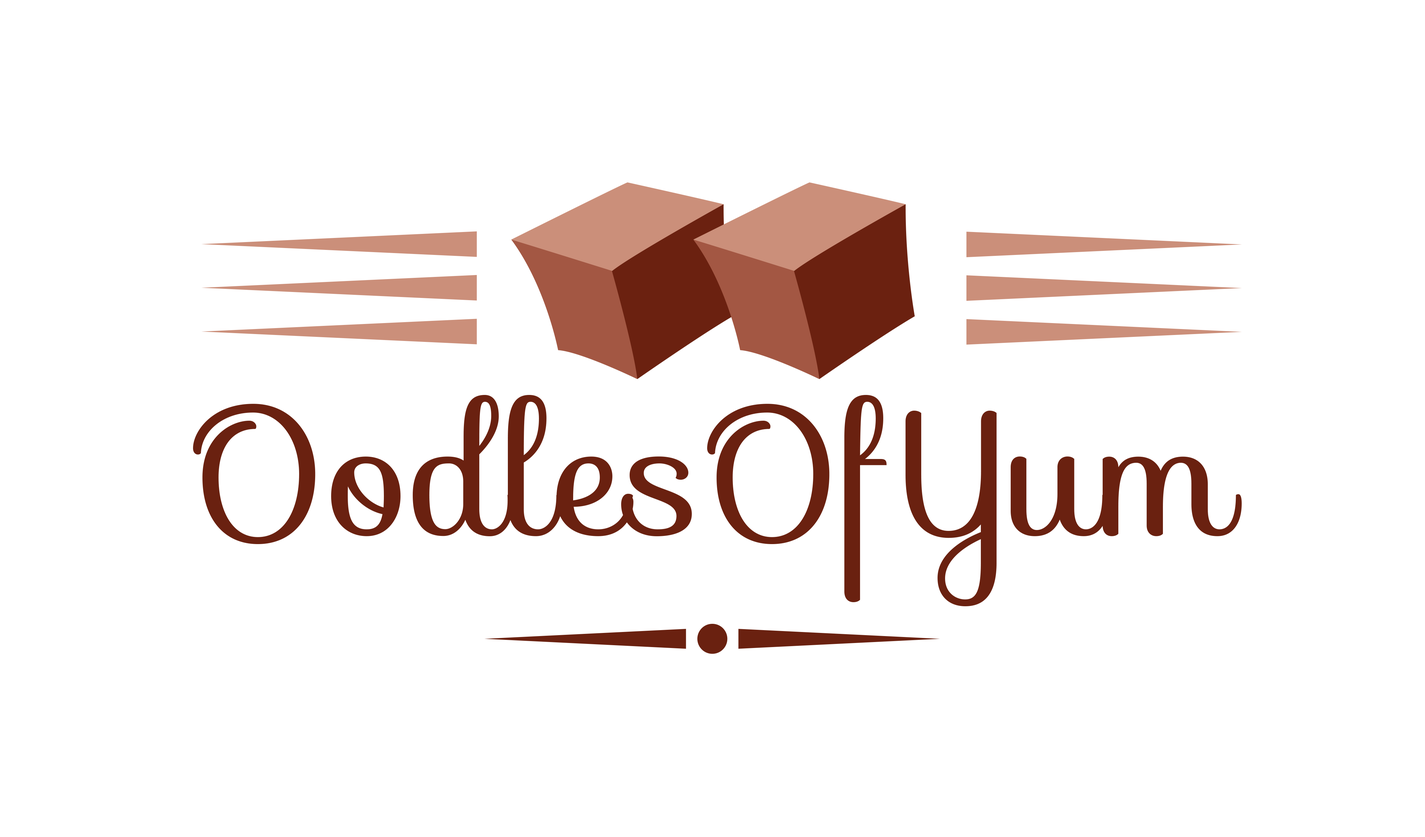
<style>
.page{position:relative;width:1425px;height:837px;background:#ffffff}
.page>*{position:absolute;margin:0}
.t1{font:174.8px "Sofia-Regular";color:#6a2110}
</style>
<div class="page">
<p class="t1" style="left:193px;top:395px;width:1049px;height:211px">OodlesOfYum</p>
</div>
